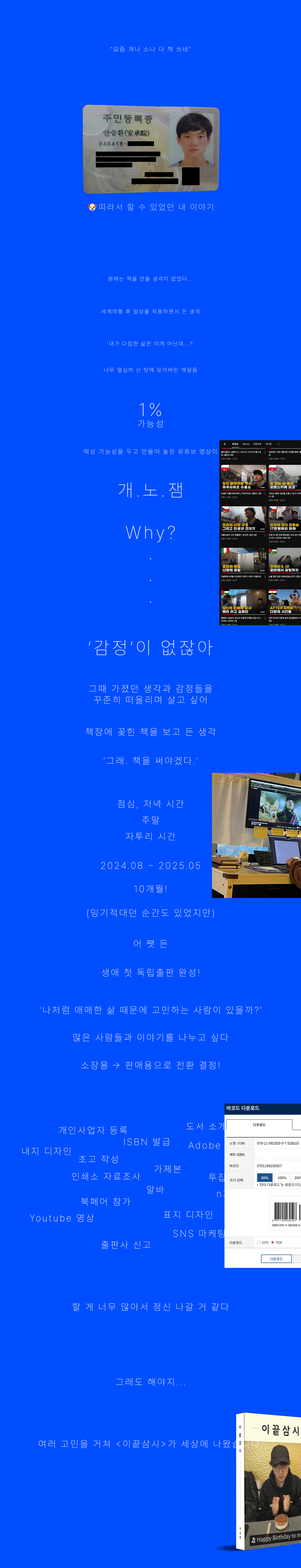
<style>
.page{position:relative;width:301px;height:1568px;background:#004eff}
.page>*{position:absolute;margin:0}
.t1{font:6.3px "Pretendard-Thin";letter-spacing:0.15em;color:#ffffff}
.t2{font:8.3px "Pretendard-Thin";letter-spacing:0.15em}
.t3{font:8.3px "NotoColorEmoji-SVG";letter-spacing:0.15em}
.t4{font:5.4px "Pretendard-Thin";letter-spacing:0.15em;color:#ffffff}
.t5{font:5.5px "Pretendard-Thin";letter-spacing:0.15em;color:#ffffff}
.t6{font:9px "Pretendard-Thin";letter-spacing:0.15em;color:#ffffff}
.t7{font:18.1px "Pretendard-Thin";letter-spacing:0.15em;color:#ffffff}
.t8{font:9.4px "Pretendard-Thin";letter-spacing:0.15em;color:#ffffff}
</style>
<div class="page">
<p class="t1" style="left:110px;top:46px;width:81px;height:6px">“요즘 개나 소나 다 책 쓰네”</p>
<p class="t2" style="left:88px;top:203px;width:125px;height:8px"><span class="t3">🐶</span>띠라서 할 수 있었던 내 이야기</p>
<p class="t4" style="left:108px;top:276px;width:85px;height:5px">원래는 책을 만들 생각이 없었다...</p>
<p class="t5" style="left:101px;top:309px;width:99px;height:5px">세계여행 후 일상을 적응하면서 든 생각</p>
<p class="t5" style="left:107px;top:341px;width:87px;height:5px">‘내가 다짐한 삶은 이게 아닌데...?’</p>
<p class="t5" style="left:104px;top:368px;width:93px;height:4px">너무 열심히 산 탓에 잊어버린 깨달음</p>
<p class="t6" style="left:138px;top:403px;width:25px;height:25px;text-align:center"><span class="t7">1%<br></span>가능성</p>
<p class="t1" style="left:84px;top:449px;width:133px;height:5px">떡상 가능성을 두고 만들어 놓은 유튜브 영상이</p>
<p class="t7" style="left:119px;top:482px;width:63px;height:16px">개.노.잼</p>
<p class="t7" style="left:126px;top:526px;width:49px;height:16px">Why?</p>
<p class="t7" style="left:150px;top:558px;width:1px;height:45px;text-align:center">.<br>.<br>.</p>
<p class="t7" style="left:89px;top:640px;width:124px;height:15px">‘감정’이 없잖아</p>
<p class="t8" style="left:89px;top:685px;width:123px;height:19px;text-align:center">그때 가졌던 생각과 감정들을<br>꾸준히 떠올리며 살고 싶어</p>
<p class="t8" style="left:86px;top:728px;width:130px;height:8px">책장에 꽂힌 책을 보고 든 생각</p>
<p class="t8" style="left:104px;top:757px;width:94px;height:8px">‘그래. 책을 써야겠다.’</p>
<p class="t8" style="left:118px;top:800px;width:66px;height:9px">점심, 저녁 시간</p>
<p class="t8" style="left:142px;top:816px;width:17px;height:8px">주말</p>
<p class="t8" style="left:126px;top:832px;width:49px;height:9px">자투리 시간</p>
<p class="t8" style="left:101px;top:862px;width:99px;height:7px">2024.08 ~ 2025.05</p>
<p class="t8" style="left:135px;top:885px;width:31px;height:8px">10개월!</p>
<p class="t8" style="left:87px;top:909px;width:127px;height:9px">(밍기적대던 순간도 있었지만)</p>
<p class="t8" style="left:134px;top:940px;width:33px;height:8px">어 쨋 든</p>
<p class="t8" style="left:102px;top:968px;width:97px;height:9px">생애 첫 독립출판 완성!</p>
<p class="t8" style="left:40px;top:1006px;width:221px;height:8px">‘나처럼 애매한 삶 때문에 고민하는 사람이 있을까?’</p>
<p class="t8" style="left:73px;top:1033px;width:155px;height:9px">많은 사람들과 이야기를 나누고 싶다</p>
<p class="t8" style="left:81px;top:1061px;width:139px;height:8px">소장용 -&gt; 판매용으로 전환 결정!</p>
<p class="t8" style="left:59px;top:1126px;width:68px;height:8px">개인사업자 등록</p>
<p class="t8" style="left:124px;top:1138px;width:46px;height:8px">ISBN 발급</p>
<p class="t8" style="left:189px;top:1141px;width:53px;height:8px">Adobe 결제</p>
<p class="t8" style="left:22px;top:1147px;width:49px;height:8px">내지 디자인</p>
<p class="t8" style="left:79px;top:1155px;width:39px;height:8px">초고 작성</p>
<p class="t8" style="left:154px;top:1165px;width:27px;height:8px">가제본</p>
<p class="t8" style="left:72px;top:1172px;width:68px;height:9px">인쇄소 자료조사</p>
<p class="t8" style="left:209px;top:1173px;width:17px;height:8px">투잡</p>
<p class="t8" style="left:147px;top:1186px;width:17px;height:8px">알바</p>
<p class="t8" style="left:81px;top:1197px;width:49px;height:9px">북페어 참가</p>
<p class="t8" style="left:30px;top:1214px;width:64px;height:8px">Youtube 영상</p>
<p class="t8" style="left:164px;top:1211px;width:48px;height:8px">표지 디자인</p>
<p class="t8" style="left:173px;top:1229px;width:52px;height:9px">SNS 마케팅</p>
<p class="t8" style="left:101px;top:1241px;width:50px;height:8px">출판사 신고</p>
<p class="t8" style="left:72px;top:1303px;width:157px;height:8px">할 게 너무 많아서 정신 나갈 거 같다</p>
<p class="t8" style="left:116px;top:1378px;width:69px;height:8px">그래도 해야지...</p>
<p class="t8" style="left:39px;top:1440px;width:223px;height:8px">여러 고민을 거쳐 &lt;이끝삼시&gt;가 세상에 나왔습니다.</p>
</div>
